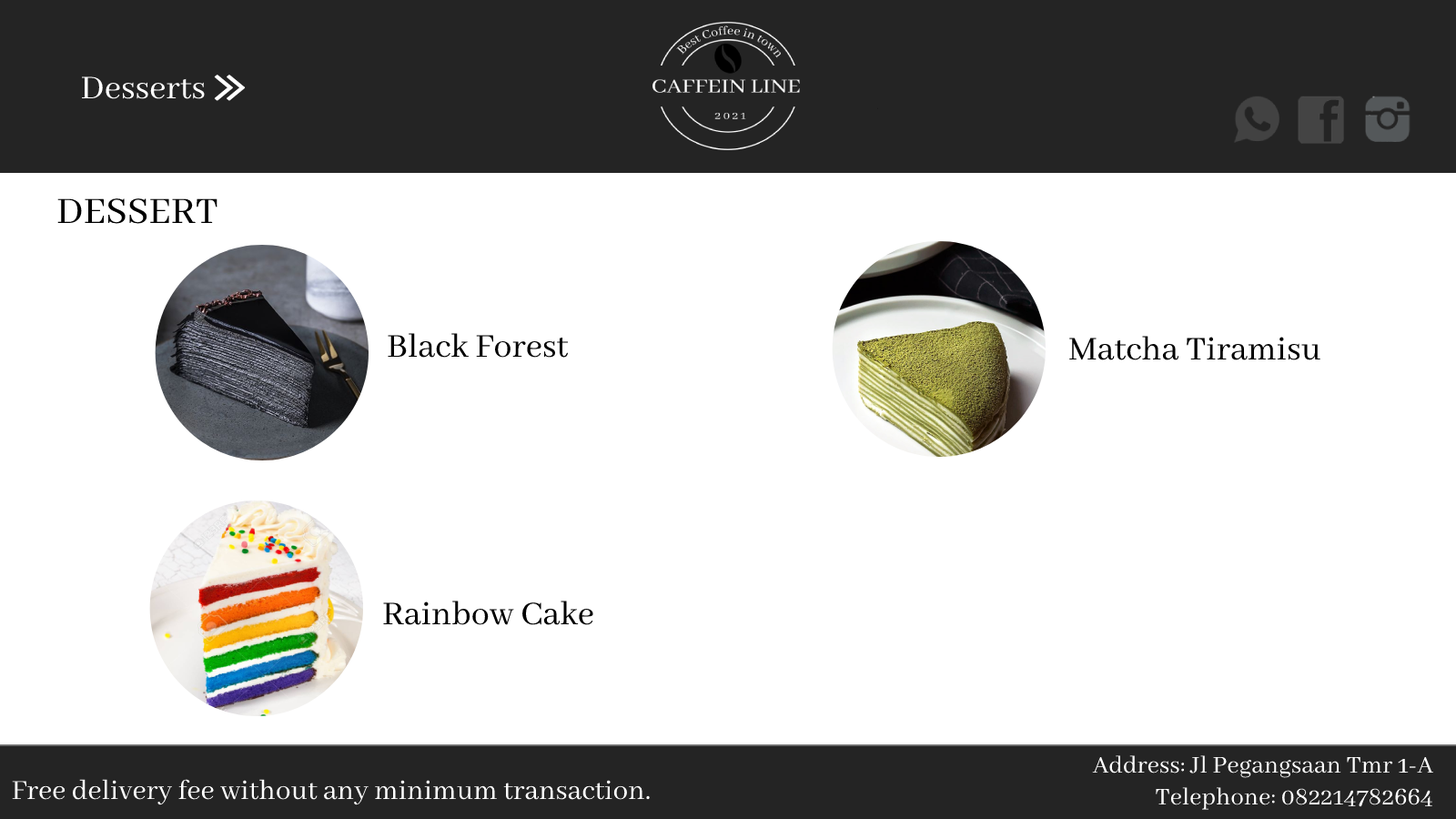
<style>
.page{position:relative;width:1456px;height:819px;background:#ffffff}
.page>*{position:absolute;margin:0}
.t1{font:36.4px "AbhayaLibre-Regular";color:#ffffff}
.t2{font:40.9px "AbhayaLibre-Regular";color:#000000}
.t3{font:36.4px "AbhayaLibre-Regular";color:#000000}
.t4{font:26.5px "AbhayaLibre-Regular";color:#ffffff}
.t5{font:30.3px "AbhayaLibre-Regular";color:#ffffff}
</style>
<div class="page">
<p class="t1" style="left:81px;top:76px;width:124px;height:23px">Desserts</p>
<p class="t2" style="left:57px;top:198px;width:160px;height:26px">DESSERT</p>
<p class="t3" style="left:388px;top:333px;width:181px;height:25px">Black Forest</p>
<p class="t3" style="left:1069px;top:336px;width:251px;height:24px">Matcha Tiramisu</p>
<p class="t3" style="left:383px;top:601px;width:210px;height:24px">Rainbow Cake</p>
<p class="t4" style="left:1092px;top:755px;width:341px;height:55px;text-align:right">Address: Jl Pegangsaan Tmr 1-A<br>Telephone: 082214782664</p>
<p class="t5" style="left:12px;top:779px;width:638px;height:26px">Free delivery fee without any minimum transaction.</p>
</div>
